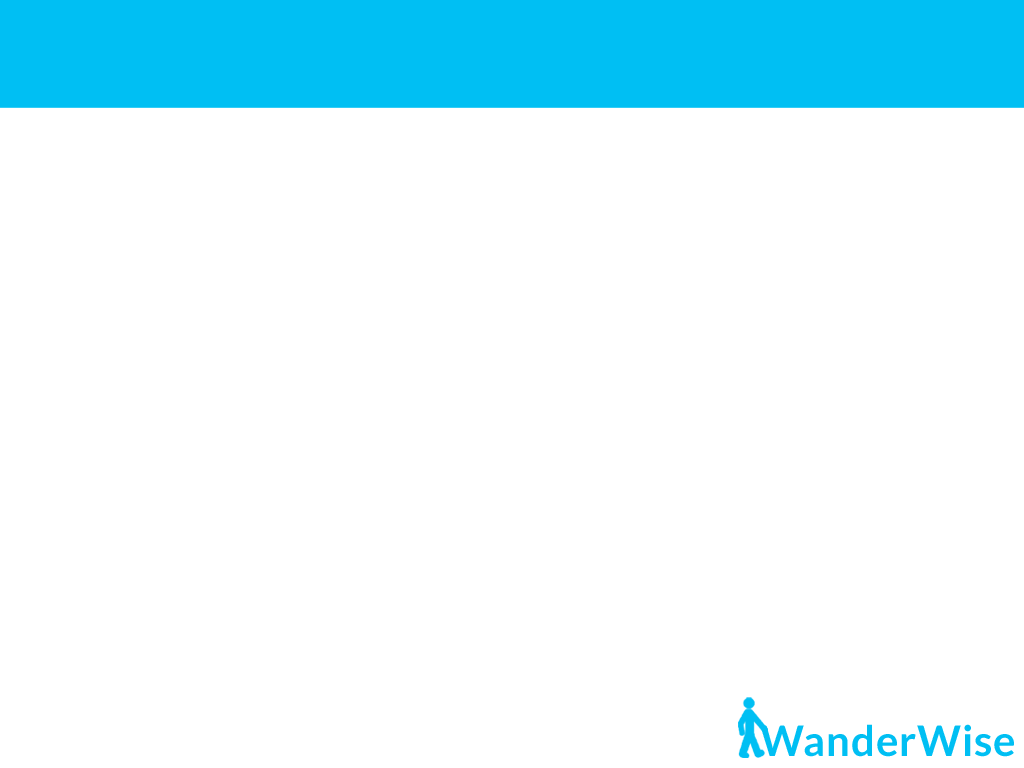
<style>
.page{position:relative;width:1024px;height:768px;background:#ffffff}
.page>*{position:absolute;margin:0}
.t1{font:42px "Lato-Bold";letter-spacing:0.025em;color:#00bff3}
</style>
<div class="page">
<p class="t1" style="left:760px;top:724px;width:254px;height:33px">WanderWise</p>
</div>
